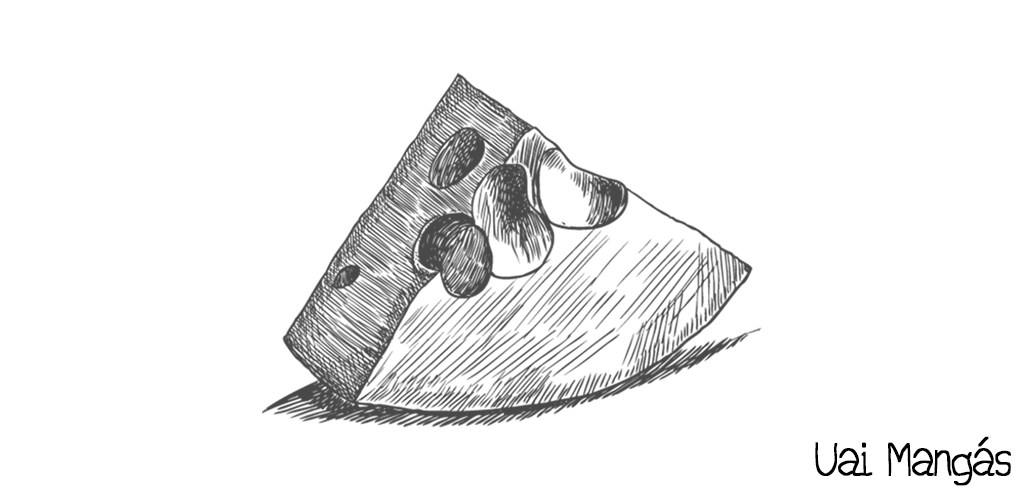
<style>
.page{position:relative;width:1024px;height:500px;background:#ffffff}
.page>*{position:absolute;margin:0}
.t1{font:50px "JDDaring-Regular";color:#000000}
</style>
<div class="page">
<p class="t1" style="left:815px;top:436px;width:196px;height:50px">Uai Mangás</p>
</div>
